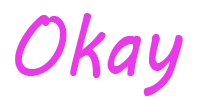
<style>
.page{position:relative;width:200px;height:100px;background:#ffffff}
.page>*{position:absolute;margin:0}
.t1{font:88.1px "MVBoli";color:#ea39e8;scale:0.89 1}
</style>
<div class="page">
<p class="t1" style="left:15px;top:13px;width:168px;height:83px">Okay</p>
</div>
